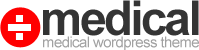
<style>
.page{position:relative;width:199px;height:50px;background:#ffffff}
.page>*{position:absolute;margin:0}
.t1{font:48px "Arial-BoldMT";letter-spacing:-0.06em;color:#343434}
.t2{font:15px "ArialMT";letter-spacing:-0.04em;color:#a1a1a1}
</style>
<div class="page">
<p class="t1" style="left:43px;top:0px;width:156px;height:36px">medical</p>
<p class="t2" style="left:43px;top:36px;width:156px;height:15px">medical wordpress theme</p>
</div>
